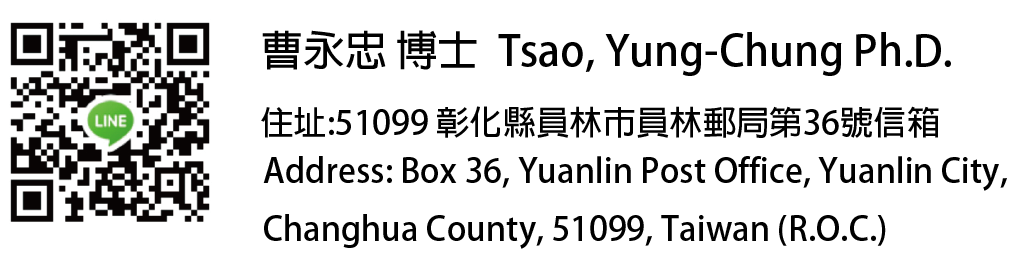
<style>
.page{position:relative;width:1024px;height:258px;background:#ffffff}
.page>*{position:absolute;margin:0}
.t1{font:41.7px "AdobeFanHeitiStd-Bold";color:#000000}
.t2{font:33.3px "AdobeFanHeitiStd-Bold";color:#000000}
</style>
<div class="page">
<p class="t1" style="left:262px;top:30px;width:689px;height:46px">曹永忠 博士  Tsao, Yung-Chung Ph.D.</p>
<p class="t2" style="left:261px;top:106px;width:678px;height:32px">住址:51099 彰化縣員林市員林郵局第36號信箱</p>
<p class="t2" style="left:263px;top:156px;width:744px;height:93px">Address: Box 36, Yuanlin Post Office, Yuanlin City,<br>Changhua County, 51099, Taiwan (R.O.C.)</p>
</div>
